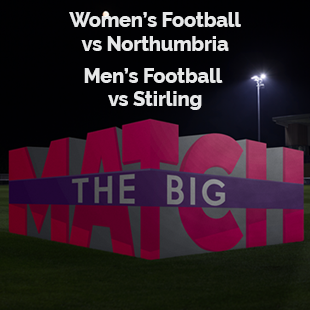
<style>
.page{position:relative;width:310px;height:310px}
.page>*{position:absolute;margin:0}
.t1{font:19.6px "Raleway-ExtraBold";color:#e6e7e8}
.t2{font:19.6px/32px "Raleway-ExtraBold";color:#e6e7e8}
</style>
<div class="page">
<p class="t1" style="left:69px;top:12px;width:172px;height:98px;text-align:center">Women’s Football<br>vs Northumbria<br><span class="t2">Men’s Football <br></span>vs Stirling</p>
</div>
